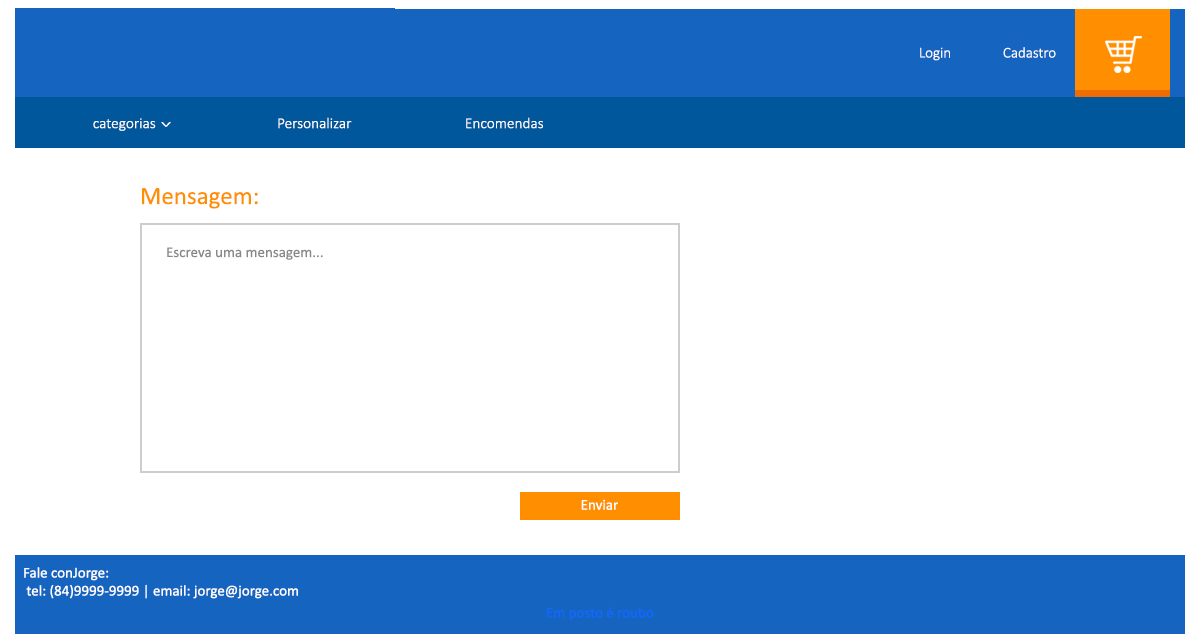
<style>
.page{position:relative;width:1200px;height:634px;background:#ffffff}
.page>*{position:absolute;margin:0}
.t1{font:15px "Calibri-Light";color:#ffffff}
.t2{font:9.2px "Calibri-Light";color:#ffffff;scale:2.47 1}
.t3{font:25px "Calibri";color:#ff8f00}
.t4{font:15px "Calibri";color:#888888}
.t5{font:15px "Calibri";color:#ffffff}
.t6{font:15px "Calibri";color:#1466ff}
</style>
<div class="page">
<p class="t1" style="left:920px;top:47px;width:30px;height:14px">Login</p>
<p class="t1" style="left:1003px;top:47px;width:53px;height:11px">Cadastro</p>
<p class="t1" style="left:93px;top:118px;width:63px;height:13px">categorias</p>
<p class="t2" style="left:161px;top:122px;width:10px;height:5px">v</p>
<p class="t1" style="left:278px;top:117px;width:74px;height:12px">Personalizar</p>
<p class="t1" style="left:466px;top:117px;width:77px;height:12px">Encomendas</p>
<p class="t3" style="left:142px;top:188px;width:116px;height:21px">Mensagem:</p>
<p class="t4" style="left:167px;top:247px;width:156px;height:13px">Escreva uma mensagem...</p>
<p class="t5" style="left:581px;top:499px;width:37px;height:11px">Enviar</p>
<p class="t5" style="left:24px;top:567px;width:274px;height:32px">Fale conJorge:<br> tel: (84)9999-9999 | email: jorge@jorge.com</p>
<p class="t6" style="left:547px;top:607px;width:107px;height:14px">Em posto é roubo</p>
</div>
